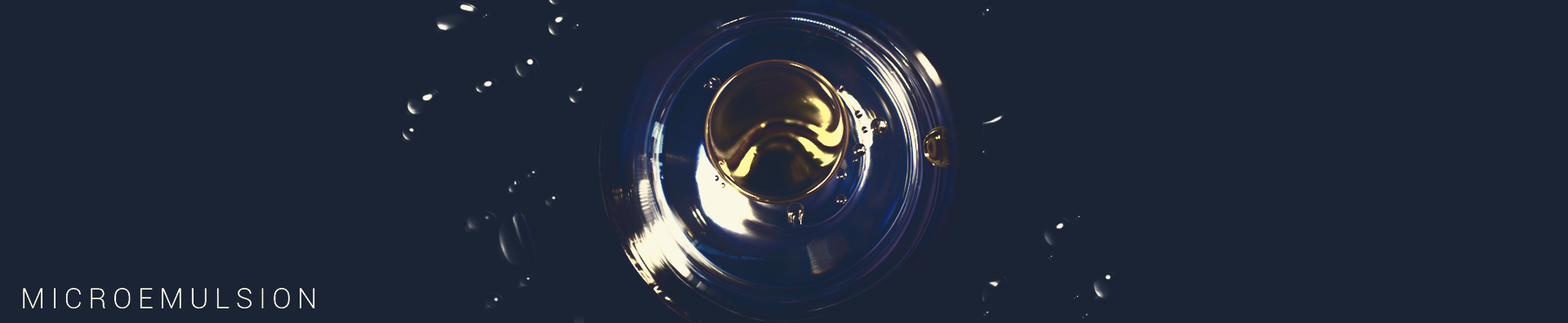
<style>
.page{position:relative;width:1568px;height:323px;background:#1b2434}
.page>*{position:absolute;margin:0}
.t1{font:28.6px "Roboto-Light";letter-spacing:0.2em;color:#faf7e5;text-transform:uppercase}
</style>
<div class="page">
<p class="t1" style="left:23px;top:288px;width:292px;height:22px">MICroemulsion</p>
</div>
